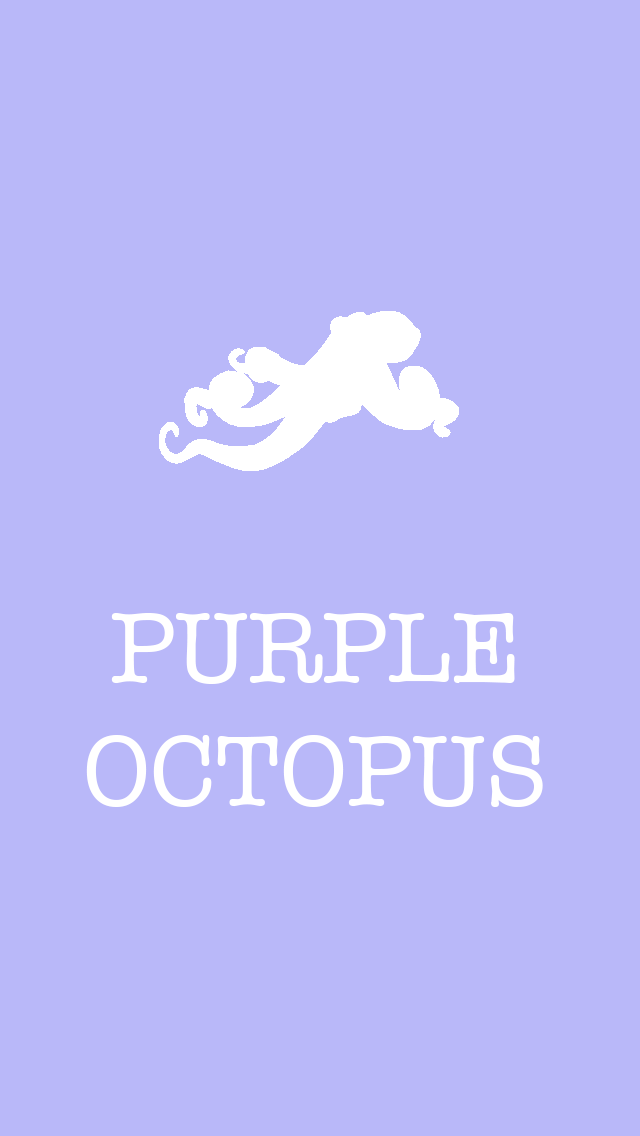
<style>
.page{position:relative;width:640px;height:1136px;background:#b9b8f9}
.page>*{position:absolute;margin:0}
.t1{font:102.2px "AmericanTypewriter";color:#ffffff;text-transform:uppercase}
</style>
<div class="page">
<p class="t1" style="left:86px;top:613px;width:457px;height:194px;text-align:center">Purple <br>Octopus</p>
</div>
